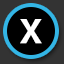
<style>
.page{position:relative;width:64px;height:64px;background:#000000}
.page>*{position:absolute;margin:0}
.t1{font:46px "Roboto-Medium";color:#ffffff}
</style>
<div class="page">
<p class="t1" style="left:20px;top:19px;width:22px;height:25px">x</p>
</div>
